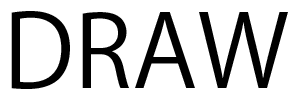
<style>
.page{position:relative;width:300px;height:100px;background:#ffffff}
.page>*{position:absolute;margin:0}
.t1{font:100px "KozGoPr6N-Regular";color:#000000}
</style>
<div class="page">
<p class="t1" style="left:11px;top:11px;width:277px;height:78px">DRAW</p>
</div>
